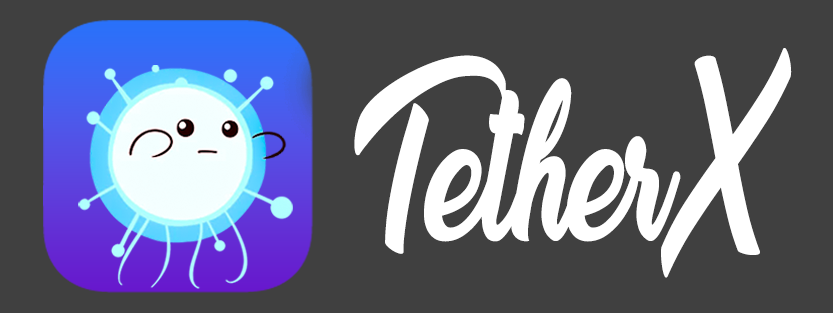
<style>
.page{position:relative;width:833px;height:313px;background:#404040}
.page>*{position:absolute;margin:0}
.t1{font:249.4px "SweetSensationsPersonalUse";color:#ffffff;scale:0.71 1}
</style>
<div class="page">
<p class="t1" style="left:354px;top:48px;width:438px;height:230px">TetherX</p>
</div>
